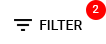
<style>
.page{position:relative;width:106px;height:44px;background:#ffffff}
.page>*{position:absolute;margin:0}
.t1{font:11px "Roboto-Regular";color:#ffffff;text-transform:uppercase}
.t2{font:14px "Roboto-Medium";color:#000000;text-transform:uppercase}
</style>
<div class="page">
<p class="t1" style="left:92px;top:5px;width:7px;height:8px">2</p>
<p class="t2" style="left:40px;top:20px;width:42px;height:10px">Filter</p>
</div>
